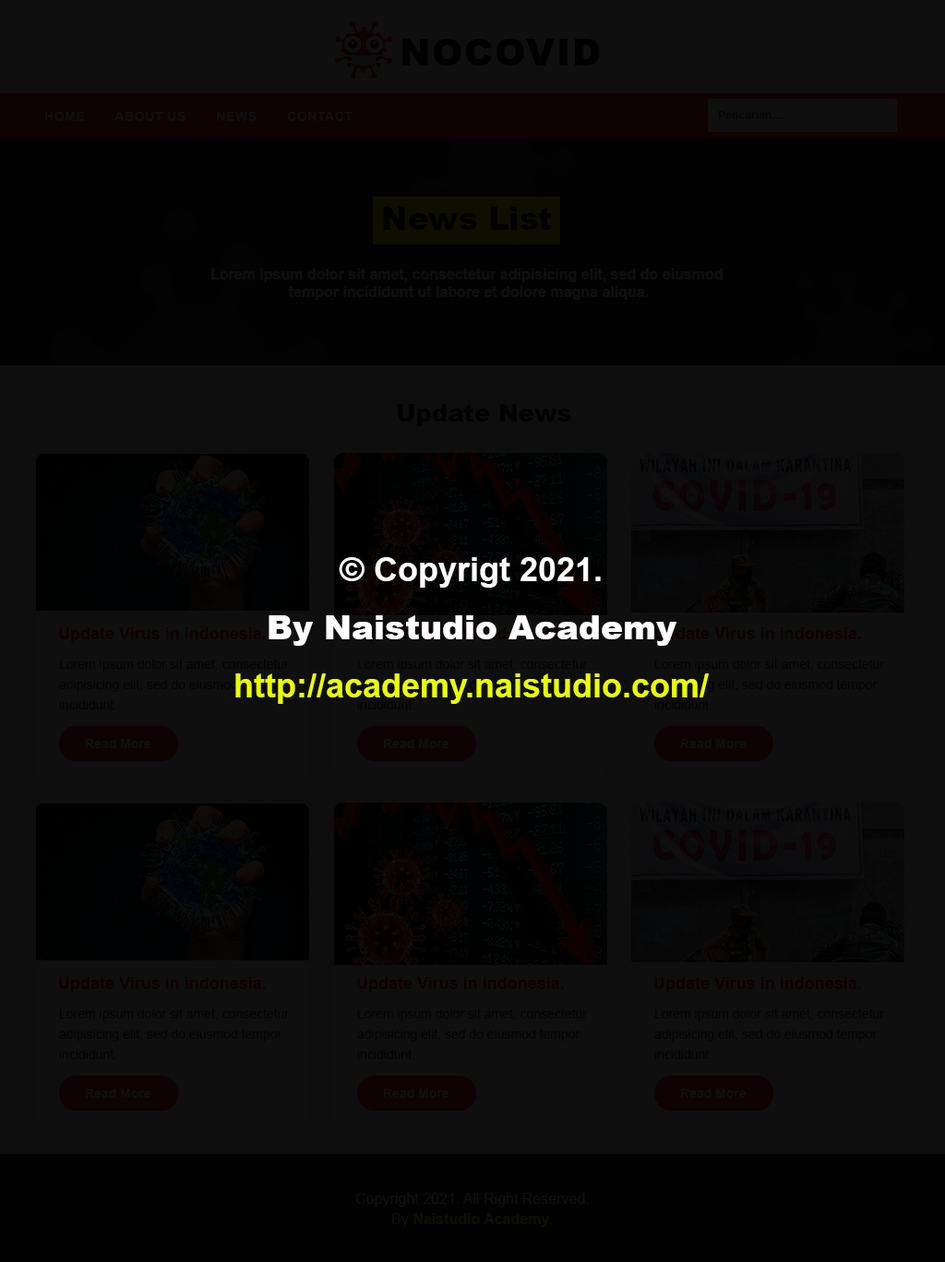
<style>
.page{position:relative;width:945px;height:1262px;background:#0f0f0f}
.page>*{position:absolute;margin:0}
.t1{font:36.9px "Arial-Black";letter-spacing:0.01em;color:#000000;text-transform:uppercase}
.t2{font:12.9px "Arial-BoldMT";letter-spacing:0.01em;color:#0f0f0f;text-transform:uppercase}
.t3{font:11.1px "Arial-BoldMT";letter-spacing:0.01em;color:#050505}
.t4{font:31.4px "Arial-Black";color:#020202}
.t5{font:14.8px/17.5px "Arial-BoldMT";color:#0f0f0f}
.t6{font:24px "Arial-Black";color:#020202}
.t7{font:33.2px/58.1px "Arial-BoldMT";color:#eaff00}
.t8{font:33.2px/58.1px "Arial-BoldMT";color:#ffffff}
.t9{font:33.2px/58.1px "Arial-Black";color:#ffffff}
.t10{font:16.6px "Arial-BoldMT";color:#0e0202}
.t11{font:12.9px/20.3px "ArialMT";color:#040404}
.t12{font:12.9px "Arial-BoldMT";color:#0f0f0f}
.t13{font:14.8px/20.3px "ArialMT";color:#0e0f00}
.t14{font:14.8px/20.3px "Arial-BoldMT";color:#0e0f00}
</style>
<div class="page">
<p class="t1" style="left:402px;top:39px;width:198px;height:27px">nocovid</p>
<p class="t2" style="left:45px;top:112px;width:307px;height:9px">HOME        About Us        News        CONTACT</p>
<p class="t3" style="left:718px;top:111px;width:66px;height:8px">Pencarian....</p>
<p class="t4" style="left:383px;top:207px;width:169px;height:23px">News List</p>
<p class="t5" style="left:211px;top:268px;width:511px;height:32px;text-align:center">Lorem ipsum dolor sit amet, consectetur adipisicing elit, sed do eiusmod <br>tempor incididunt ut labore et dolore magna aliqua.</p>
<p class="t6" style="left:397px;top:404px;width:174px;height:22px">Update News</p>
<p class="t7" style="left:235px;top:557px;width:474px;height:147px;text-align:center"><span class="t8">© Copyrigt 2021.<br></span><span class="t9">By Naistudio Academy<br></span>http://academy.naistudio.com/</p>
<p class="t10" style="left:59px;top:627px;width:207px;height:16px">Update Virus in indonesia.</p>
<p class="t11" style="left:59px;top:659px;width:231px;height:50px">Lorem ipsum dolor sit amet, consectetur adipisicing elit, sed do eiusmod tempor incididunt.</p>
<p class="t11" style="left:357px;top:659px;width:231px;height:50px">Lorem ipsum dolor sit amet, consectetur adipisicing elit, sed do eiusmod tempor incididunt.</p>
<p class="t11" style="left:654px;top:659px;width:231px;height:50px">Lorem ipsum dolor sit amet, consectetur adipisicing elit, sed do eiusmod tempor incididunt.</p>
<p class="t12" style="left:85px;top:739px;width:66px;height:9px">Read More</p>
<p class="t12" style="left:383px;top:739px;width:66px;height:9px">Read More</p>
<p class="t12" style="left:680px;top:739px;width:66px;height:9px">Read More</p>
<p class="t10" style="left:59px;top:977px;width:207px;height:16px">Update Virus in indonesia.</p>
<p class="t10" style="left:357px;top:977px;width:207px;height:16px">Update Virus in indonesia.</p>
<p class="t10" style="left:654px;top:977px;width:207px;height:16px">Update Virus in indonesia.</p>
<p class="t11" style="left:59px;top:1008px;width:231px;height:51px">Lorem ipsum dolor sit amet, consectetur adipisicing elit, sed do eiusmod tempor incididunt.</p>
<p class="t11" style="left:357px;top:1008px;width:231px;height:51px">Lorem ipsum dolor sit amet, consectetur adipisicing elit, sed do eiusmod tempor incididunt.</p>
<p class="t11" style="left:654px;top:1008px;width:231px;height:51px">Lorem ipsum dolor sit amet, consectetur adipisicing elit, sed do eiusmod tempor incididunt.</p>
<p class="t12" style="left:85px;top:1089px;width:66px;height:9px">Read More</p>
<p class="t12" style="left:383px;top:1089px;width:66px;height:9px">Read More</p>
<p class="t12" style="left:680px;top:1089px;width:66px;height:9px">Read More</p>
<p class="t13" style="left:356px;top:1193px;width:233px;height:34px;text-align:center">Copyright 2021. All Right Reserved.<br>By <span class="t14">Naistudio Academy</span>.</p>
</div>
